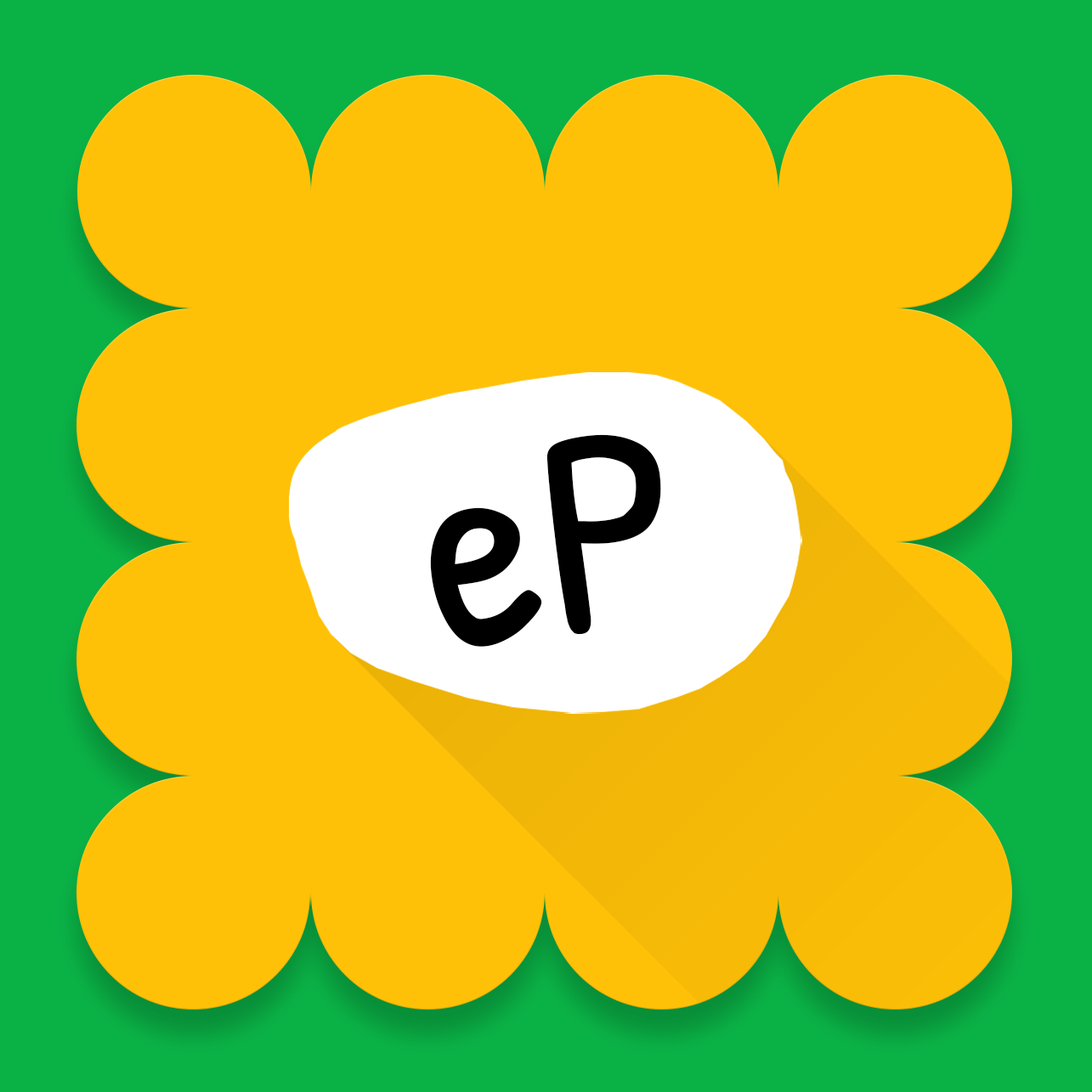
<style>
.page{position:relative;width:1092px;height:1092px;background:#ffc107}
.page>*{position:absolute;margin:0}
.t1{font:296.6px "PatrickHand-Regular";color:#000000}
</style>
<div class="page">
<p class="t1" style="left:430px;top:434px;width:231px;height:213px;rotate:-7deg">eP</p>
</div>
